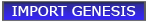
<style>
.page{position:relative;width:148px;height:22px}
.page>*{position:absolute;margin:0}
.t1{font:14px "MSReferenceSansSerif";color:#ffffff}
</style>
<div class="page">
<p class="t1" style="left:12px;top:6px;width:124px;height:10px">IMPORT GENESIS</p>
</div>
